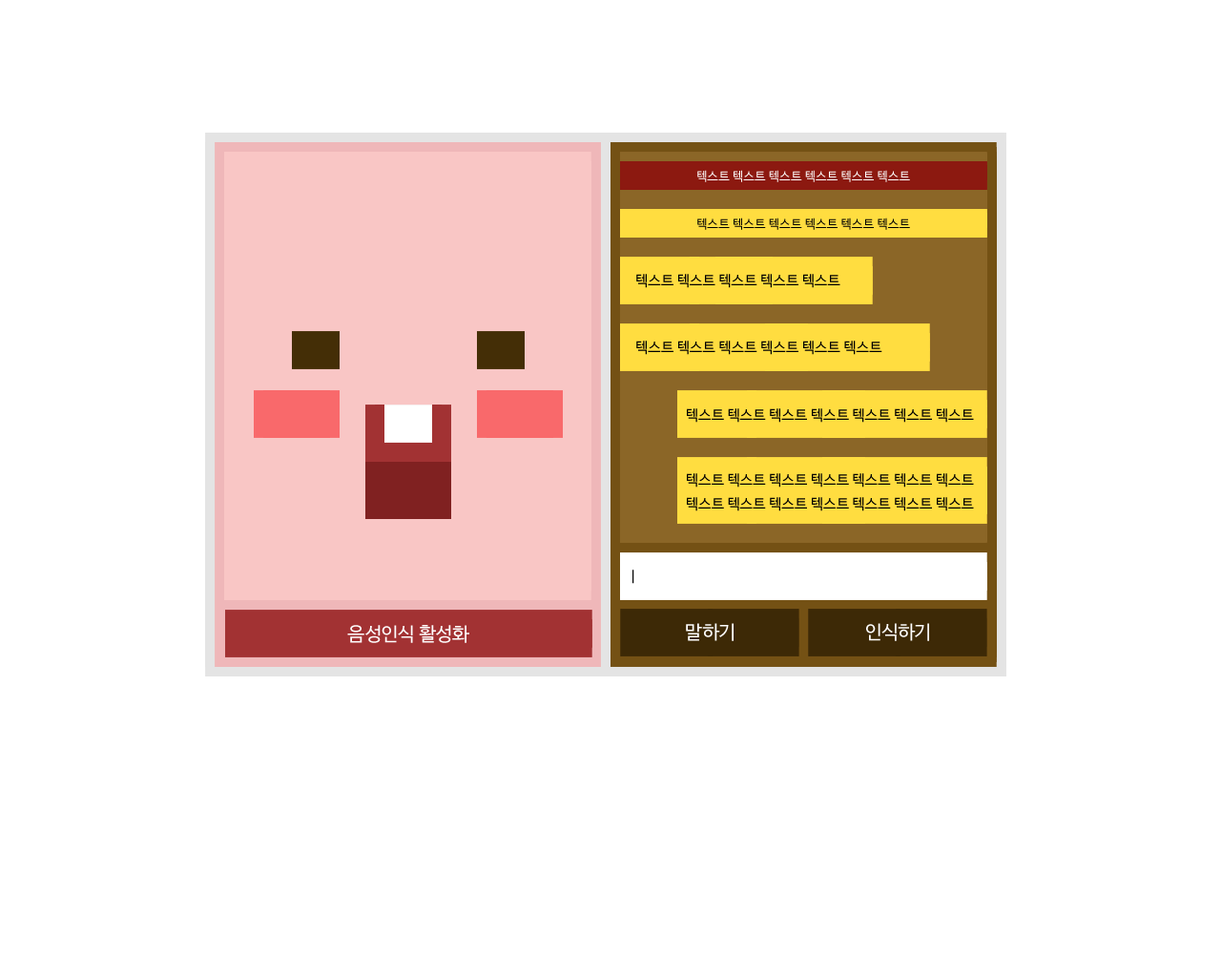
<style>
.page{position:relative;width:1221px;height:977px;background:#ffffff}
.page>*{position:absolute;margin:0}
.t1{font:12.4px "NanumBarunGothic";color:#ffffff}
.t2{font:12.4px "NanumBarunGothic";color:#000000}
.t3{font:14.3px "NanumBarunGothic";color:#000000}
.t4{font:14.3px/23.8px "NanumBarunGothic";color:#000000}
.t5{font:19.1px "NanumBarunGothic";color:#ffffff}
</style>
<div class="page">
<p class="t1" style="left:697px;top:170px;width:213px;height:12px">텍스트 텍스트 텍스트 텍스트 텍스트 텍스트</p>
<p class="t2" style="left:697px;top:217px;width:213px;height:13px">텍스트 텍스트 텍스트 텍스트 텍스트 텍스트</p>
<p class="t3" style="left:636px;top:274px;width:204px;height:14px">텍스트 텍스트 텍스트 텍스트 텍스트</p>
<p class="t3" style="left:636px;top:341px;width:246px;height:14px">텍스트 텍스트 텍스트 텍스트 텍스트 텍스트</p>
<p class="t3" style="left:687px;top:408px;width:287px;height:15px">텍스트 텍스트 텍스트 텍스트 텍스트 텍스트 텍스트</p>
<p class="t4" style="left:687px;top:473px;width:287px;height:38px;text-align:right">텍스트 텍스트 텍스트 텍스트 텍스트 텍스트 텍스트<br>텍스트 텍스트 텍스트 텍스트 텍스트 텍스트 텍스트</p>
<p class="t3" style="left:632px;top:569px;width:2px;height:15px">|</p>
<p class="t5" style="left:347px;top:625px;width:122px;height:18px">음성인식 활성화</p>
<p class="t5" style="left:686px;top:623px;width:47px;height:18px">말하기</p>
<p class="t5" style="left:866px;top:623px;width:63px;height:18px">인식하기</p>
</div>
